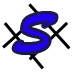
<style>
.page{position:relative;width:72px;height:72px;background:#ffffff}
.page>*{position:absolute;margin:0}
.t1{font:60px "BrushScriptMT";color:#2100ea}
</style>
<div class="page">
<p class="t1" style="left:14px;top:14px;width:42px;height:38px">S</p>
</div>
